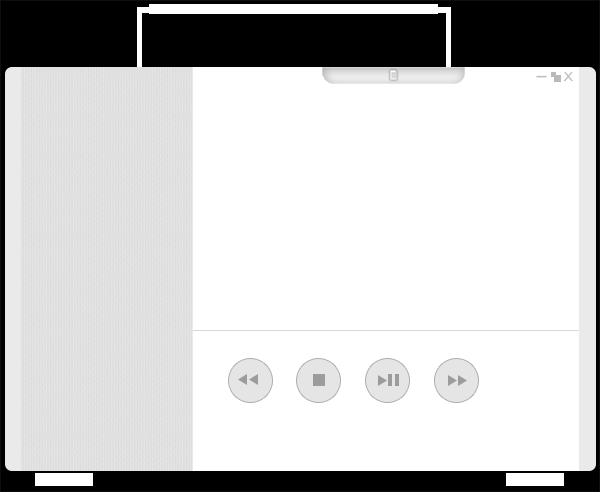
<style>
.page{position:relative;width:600px;height:492px;background:#ffffff}
.page>*{position:absolute;margin:0}
.t1{font:14.4px "GillSans";color:#bababa;scale:0.95 1}
.t2{font:12.9px "GillSans";color:#bababa}
</style>
<div class="page">
<p class="t1" style="left:536px;top:75px;width:11px;height:3px;rotate:90deg">I</p>
<p class="t2" style="left:563px;top:72px;width:10px;height:10px">X</p>
</div>
